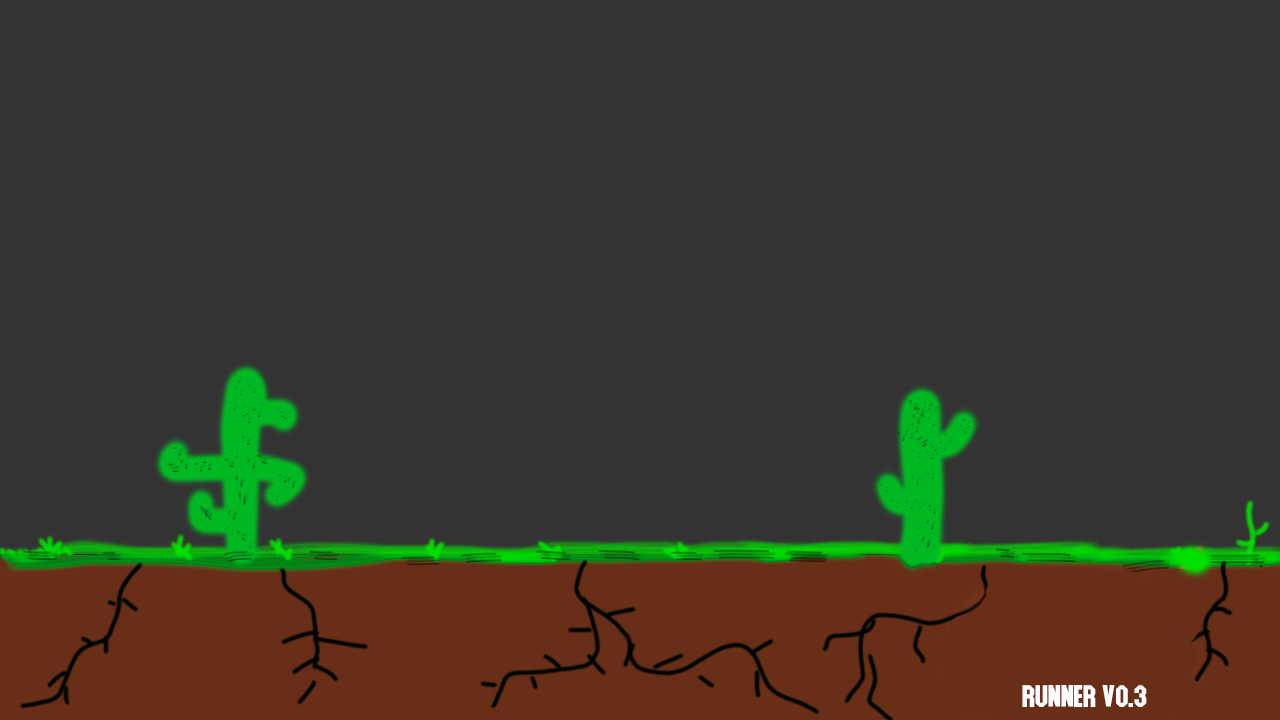
<style>
.page{position:relative;width:1280px;height:720px;background:#333333}
.page>*{position:absolute;margin:0}
.t1{font:25px "PonterPC";color:#fcfcfc}
</style>
<div class="page">
<p class="t1" style="left:1022px;top:685px;width:125px;height:22px">RUNNER V0.3</p>
</div>
